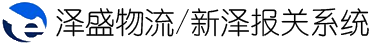
<style>
.page{position:relative;width:386px;height:44px;background:#ffffff}
.page>*{position:absolute;margin:0}
.t1{font:30px "YouYuan";color:#000000}
</style>
<div class="page">
<p class="t1" style="left:56px;top:8px;width:313px;height:29px">泽盛物流/新泽报关系统</p>
</div>
